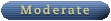
<style>
.page{position:relative;width:111px;height:21px}
.page>*{position:absolute;margin:0}
.t1{font:12px "Caecilia-Heavy";letter-spacing:0.15em;color:#cccc99}
</style>
<div class="page">
<p class="t1" style="left:20px;top:4px;width:70px;height:11px">Moderate</p>
</div>
